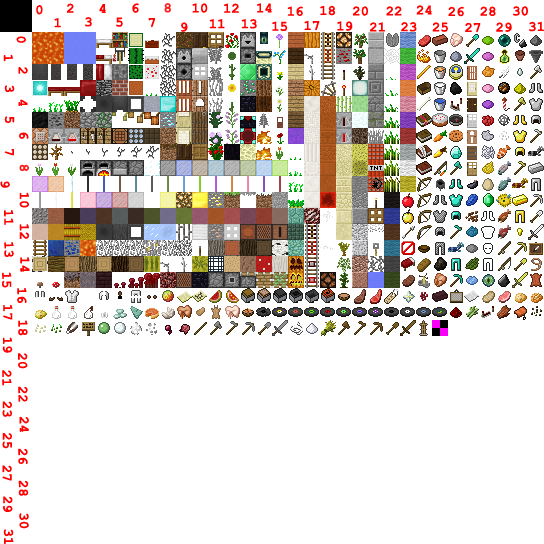
<style>
.page{position:relative;width:544px;height:544px;background:#ffffff}
.page>*{position:absolute;margin:0}
.t1{font:14px "CourierNewPS-BoldMT";color:#ff0000}
.t2{font:14px "CourierNewPS-BoldMT";color:#ff1919}
</style>
<div class="page">
<p class="t1" style="left:36px;top:5px;width:7px;height:10px">0</p>
<p class="t1" style="left:67px;top:3px;width:7px;height:10px">2</p>
<p class="t1" style="left:99px;top:4px;width:7px;height:9px">4</p>
<p class="t1" style="left:132px;top:3px;width:7px;height:10px">6</p>
<p class="t2" style="left:164px;top:3px;width:7px;height:10px">8</p>
<p class="t1" style="left:192px;top:3px;width:16px;height:10px">10</p>
<p class="t1" style="left:224px;top:3px;width:15px;height:10px">12</p>
<p class="t1" style="left:257px;top:3px;width:15px;height:10px">14</p>
<p class="t1" style="left:287px;top:6px;width:16px;height:10px">16</p>
<p class="t1" style="left:320px;top:5px;width:15px;height:11px">18</p>
<p class="t1" style="left:353px;top:6px;width:15px;height:10px">20</p>
<p class="t1" style="left:386px;top:6px;width:16px;height:10px">22</p>
<p class="t1" style="left:416px;top:5px;width:16px;height:10px">24</p>
<p class="t1" style="left:448px;top:6px;width:16px;height:11px">26</p>
<p class="t1" style="left:480px;top:6px;width:16px;height:10px">28</p>
<p class="t1" style="left:513px;top:6px;width:15px;height:10px">30</p>
<p class="t1" style="left:85px;top:17px;width:7px;height:10px">3</p>
<p class="t1" style="left:116px;top:17px;width:7px;height:10px">5</p>
<p class="t1" style="left:54px;top:18px;width:7px;height:10px">1</p>
<p class="t1" style="left:148px;top:18px;width:7px;height:10px">7</p>
<p class="t1" style="left:181px;top:22px;width:7px;height:10px">9</p>
<p class="t1" style="left:209px;top:19px;width:16px;height:10px">11</p>
<p class="t1" style="left:241px;top:19px;width:16px;height:10px">13</p>
<p class="t1" style="left:272px;top:21px;width:16px;height:10px">15</p>
<p class="t1" style="left:304px;top:20px;width:16px;height:11px">17</p>
<p class="t1" style="left:337px;top:21px;width:16px;height:10px">19</p>
<p class="t1" style="left:370px;top:22px;width:15px;height:10px">21</p>
<p class="t1" style="left:401px;top:22px;width:16px;height:10px">23</p>
<p class="t1" style="left:432px;top:22px;width:16px;height:10px">25</p>
<p class="t1" style="left:465px;top:22px;width:16px;height:11px">27</p>
<p class="t1" style="left:496px;top:22px;width:16px;height:10px">29</p>
<p class="t1" style="left:529px;top:21px;width:15px;height:11px">31</p>
<p class="t1" style="left:16px;top:36px;width:10px;height:7px;rotate:90deg">0</p>
<p class="t1" style="left:3px;top:54px;width:11px;height:8px;rotate:90deg">1</p>
<p class="t1" style="left:18px;top:67px;width:10px;height:7px;rotate:90deg">2</p>
<p class="t1" style="left:4px;top:85px;width:11px;height:8px;rotate:90deg">3</p>
<p class="t1" style="left:18px;top:99px;width:10px;height:7px;rotate:90deg">4</p>
<p class="t1" style="left:4px;top:116px;width:11px;height:8px;rotate:90deg">5</p>
<p class="t1" style="left:19px;top:132px;width:10px;height:7px;rotate:90deg">6</p>
<p class="t1" style="left:4px;top:149px;width:10px;height:7px;rotate:90deg">7</p>
<p class="t2" style="left:19px;top:164px;width:10px;height:7px;rotate:90deg">8</p>
<p class="t1" style="left:0px;top:181px;width:10px;height:7px;rotate:90deg">9</p>
<p class="t1" style="left:19px;top:192px;width:10px;height:16px;rotate:90deg">10</p>
<p class="t1" style="left:4px;top:210px;width:10px;height:15px;rotate:90deg">11</p>
<p class="t1" style="left:19px;top:224px;width:10px;height:15px;rotate:90deg">12</p>
<p class="t1" style="left:4px;top:242px;width:10px;height:15px;rotate:90deg">13</p>
<p class="t1" style="left:20px;top:257px;width:10px;height:15px;rotate:90deg">14</p>
<p class="t1" style="left:2px;top:272px;width:10px;height:16px;rotate:90deg">15</p>
<p class="t1" style="left:17px;top:288px;width:10px;height:15px;rotate:90deg">16</p>
<p class="t1" style="left:3px;top:304px;width:10px;height:16px;rotate:90deg">17</p>
<p class="t1" style="left:18px;top:320px;width:10px;height:16px;rotate:90deg">18</p>
<p class="t1" style="left:2px;top:337px;width:11px;height:16px;rotate:90deg">19</p>
<p class="t1" style="left:18px;top:353px;width:10px;height:16px;rotate:90deg">20</p>
<p class="t1" style="left:2px;top:370px;width:10px;height:16px;rotate:90deg">21</p>
<p class="t1" style="left:18px;top:386px;width:10px;height:16px;rotate:90deg">22</p>
<p class="t1" style="left:2px;top:401px;width:10px;height:16px;rotate:90deg">23</p>
<p class="t1" style="left:19px;top:416px;width:10px;height:16px;rotate:90deg">24</p>
<p class="t1" style="left:2px;top:433px;width:10px;height:16px;rotate:90deg">25</p>
<p class="t1" style="left:18px;top:448px;width:10px;height:16px;rotate:90deg">26</p>
<p class="t1" style="left:2px;top:465px;width:10px;height:16px;rotate:90deg">27</p>
<p class="t1" style="left:18px;top:480px;width:11px;height:16px;rotate:90deg">28</p>
<p class="t1" style="left:3px;top:496px;width:10px;height:16px;rotate:90deg">29</p>
<p class="t1" style="left:19px;top:513px;width:10px;height:16px;rotate:90deg">30</p>
<p class="t1" style="left:3px;top:529px;width:11px;height:16px;rotate:90deg">31</p>
</div>
